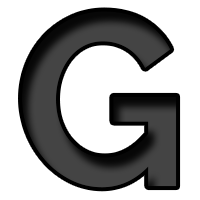
<style>
.page{position:relative;width:200px;height:200px;background:#ffffff}
.page>*{position:absolute;margin:0}
.t1{font:244px "Raleway-Bold";color:#444444}
</style>
<div class="page">
<p class="t1" style="left:22px;top:11px;width:155px;height:177px">G</p>
</div>
